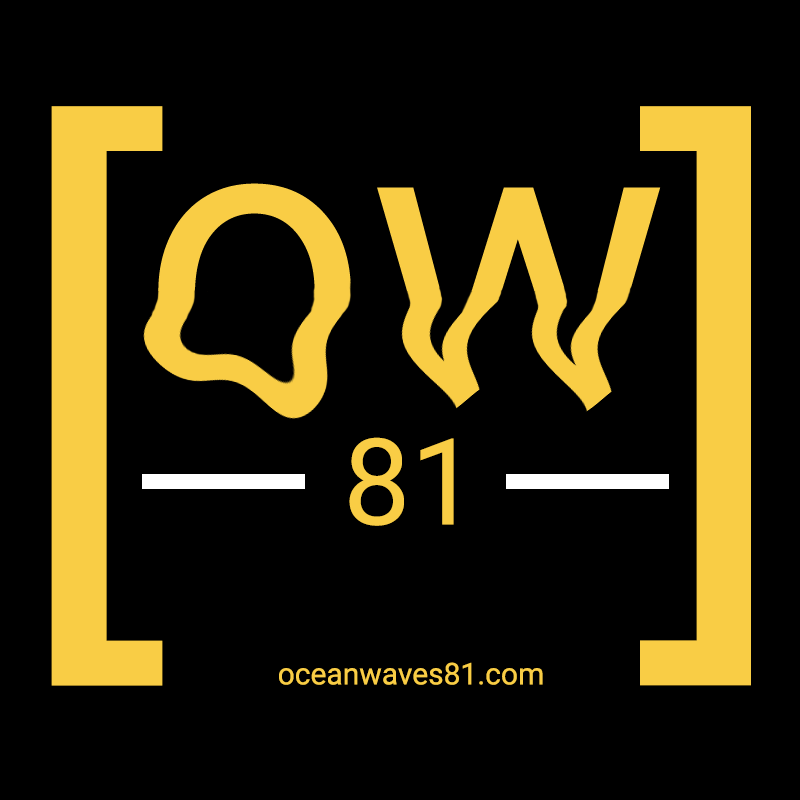
<style>
.page{position:relative;width:800px;height:800px;background:#000000}
.page>*{position:absolute;margin:0}
.t1{font:600px "Roboto-Regular";color:#f9cd45}
.t2{font:120px "Roboto-Regular";color:#f9cd45}
.t3{font:30px "Roboto-Regular";color:#f9cd45}
</style>
<div class="page">
<p class="t1" style="left:51px;top:106px;width:112px;height:580px">[</p>
<p class="t1" style="left:640px;top:106px;width:111px;height:580px">]</p>
<p class="t2" style="left:349px;top:437px;width:105px;height:89px">81</p>
<p class="t3" style="left:279px;top:662px;width:264px;height:23px">oceanwaves81.com</p>
</div>
